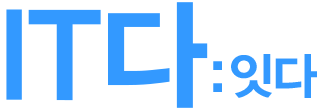
<style>
.page{position:relative;width:320px;height:110px;background:#ffffff}
.page>*{position:absolute;margin:0}
.t1{font:120px "YDYGO300-Bold";letter-spacing:-0.025em;color:#3399ff}
.t2{font:50px "YDYGO300-Bold";letter-spacing:-0.025em;color:#3399ff}
</style>
<div class="page">
<p class="t1" style="left:6px;top:2px;width:311px;height:106px">IT다<span class="t2">:잇다</span></p>
</div>
